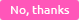
<style>
.page{position:relative;width:79px;height:20px;background:#ff56b9}
.page>*{position:absolute;margin:0}
.t1{font:12px "Ubuntu-Medium";color:#ffffff}
</style>
<div class="page">
<p class="t1" style="left:11px;top:5px;width:59px;height:11px">No, thanks</p>
</div>
